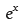
<style>
.page{position:relative;width:24px;height:24px;background:#ffffff}
.page>*{position:absolute;margin:0}
.t1{font:24px "Gabriola";color:#1f1d1d}
</style>
<div class="page">
<p class="t1" style="left:6px;top:6px;width:13px;height:13px">ex</p>
</div>
